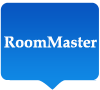
<style>
.page{position:relative;width:100px;height:90px}
.page>*{position:absolute;margin:0}
.t1{font:15.8px "BookAntiqua-Bold";color:#fefefe}
</style>
<div class="page">
<p class="t1" style="left:4px;top:36px;width:93px;height:12px">RoomMaster</p>
</div>
